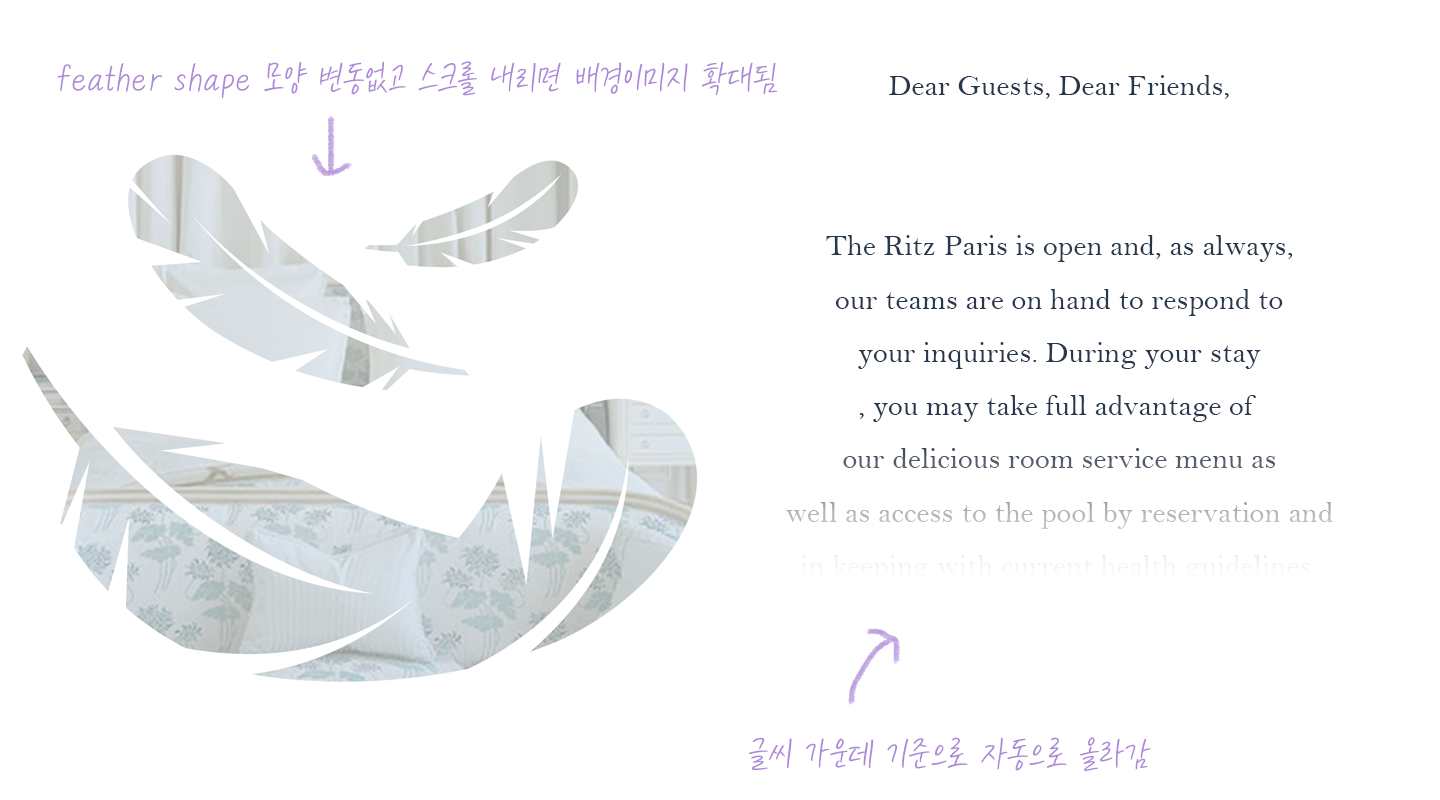
<style>
.page{position:relative;width:1440px;height:800px;background:#ffffff}
.page>*{position:absolute;margin:0}
.t1{font:41.7px "KCC-eunyoung-Regular";color:#ac89d7}
.t2{font:30.4px "BellMT"}
</style>
<div class="page">
<p class="t1" style="left:57px;top:61px;width:721px;height:38px">feather shape 모양 변동없고 스크롤 내리면 배경이미지 확대됨</p>
<p class="t2" style="left:696px;top:75px;width:726px;height:720px;text-align:center">Dear Guests, Dear Friends,<br><br><br>The Ritz Paris is open and, as always,<br>our teams are on hand to respond to<br>your inquiries. During your stay<br>, you may take full advantage of <br>our delicious room service menu as<br> well as access to the pool by reservation and <br>in keeping with current health guidelines.<br><br>Need a little pampering? Don’t hesitate<br> to book a treatment at the Ritz Club <br>or an appointment with our star hairstylist, David Mallett.</p>
<p class="t1" style="left:748px;top:737px;width:403px;height:35px">글씨 가운데 기준으로 자동으로 올라감</p>
</div>
